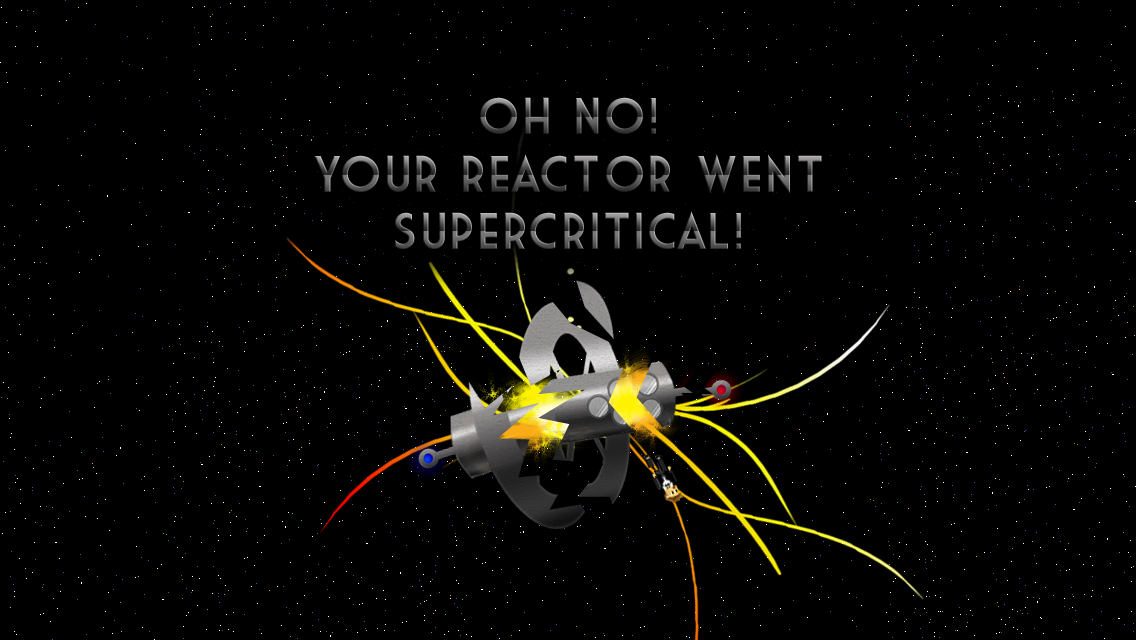
<style>
.page{position:relative;width:1136px;height:640px;background:#000000}
.page>*{position:absolute;margin:0}
.t1{font:50px "MarketDeco";letter-spacing:0.04em}
</style>
<div class="page">
<p class="t1" style="left:480px;top:97px;width:176px;height:37px">Oh No!</p>
<p class="t1" style="left:314px;top:154px;width:508px;height:40px">Your reactor went</p>
<p class="t1" style="left:395px;top:211px;width:346px;height:38px">supercritical!</p>
</div>
